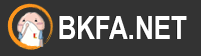
<style>
.page{position:relative;width:201px;height:56px;background:#333333}
.page>*{position:absolute;margin:0}
.t1{font:31.6px "ArialNarrow-Bold";color:#ffffff}
</style>
<div class="page">
<p class="t1" style="left:59px;top:16px;width:128px;height:23px">BKFA.NET</p>
</div>
